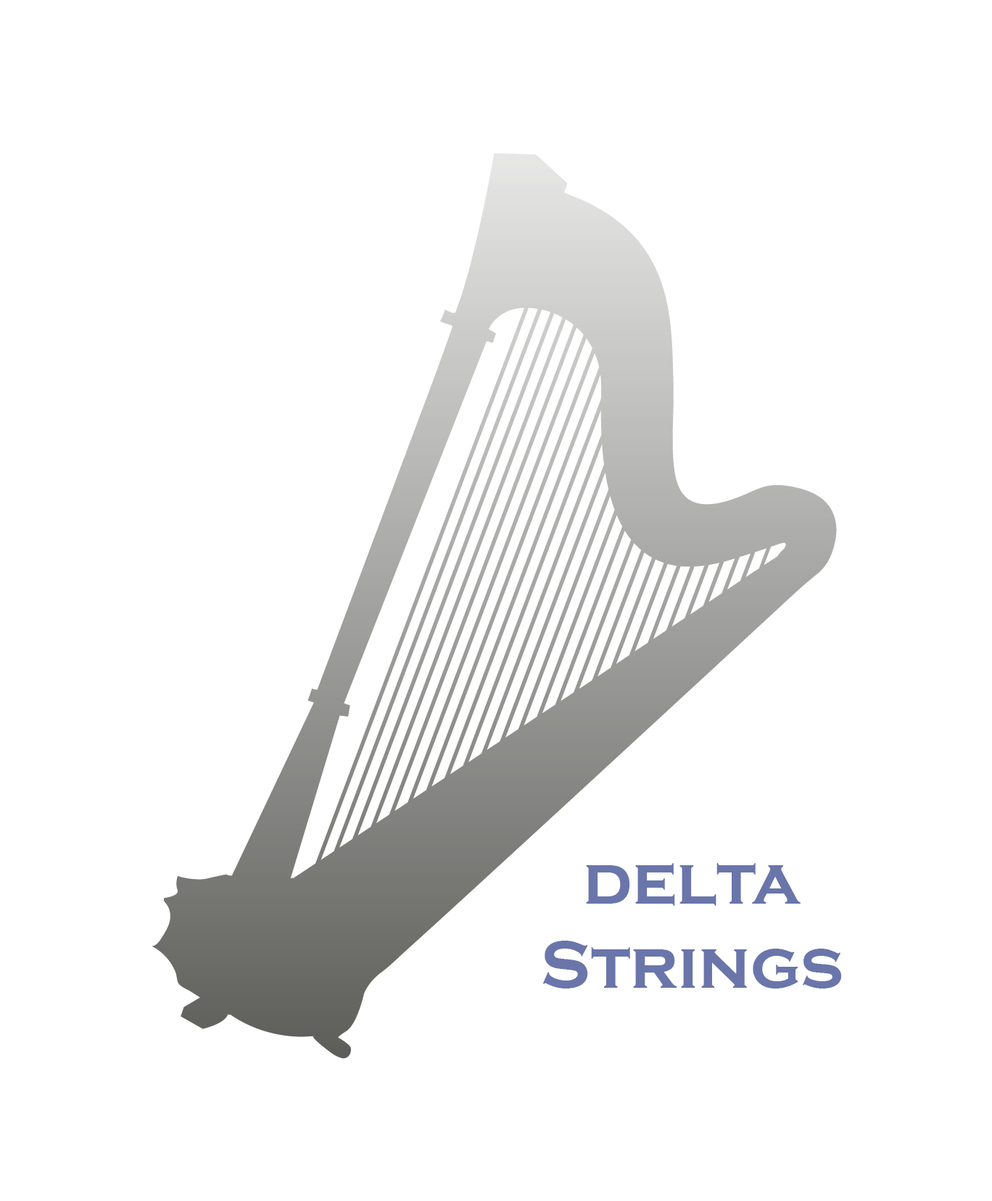
<style>
.page{position:relative;width:992px;height:1201px;background:#ffffff}
.page>*{position:absolute;margin:0}
.t1{font:69.6px "CopperplateGothic-Bold";color:#6a75aa}
</style>
<div class="page">
<p class="t1" style="left:543px;top:863px;width:299px;height:126px;text-align:center">delta<br>Strings</p>
</div>
